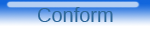
<style>
.page{position:relative;width:150px;height:30px}
.page>*{position:absolute;margin:0}
.t1{font:20px "LiberationSans-Regular";color:#2e689a}
</style>
<div class="page">
<p class="t1" style="left:38px;top:7px;width:75px;height:15px">Conform</p>
</div>
